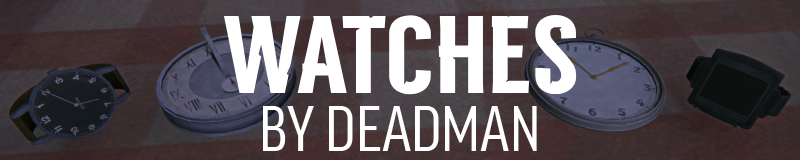
<style>
.page{position:relative;width:800px;height:160px}
.page>*{position:absolute;margin:0}
.t1{font:110px "TLD_Headline_One_Test1.5";color:#ffffff}
.t2{font:62px "FFGoodProCond-News";color:#ffffff}
</style>
<div class="page">
<p class="t1" style="left:223px;top:15px;width:354px;height:80px">WATCHES</p>
<p class="t2" style="left:263px;top:106px;width:274px;height:45px">BY DEADMAN</p>
</div>
